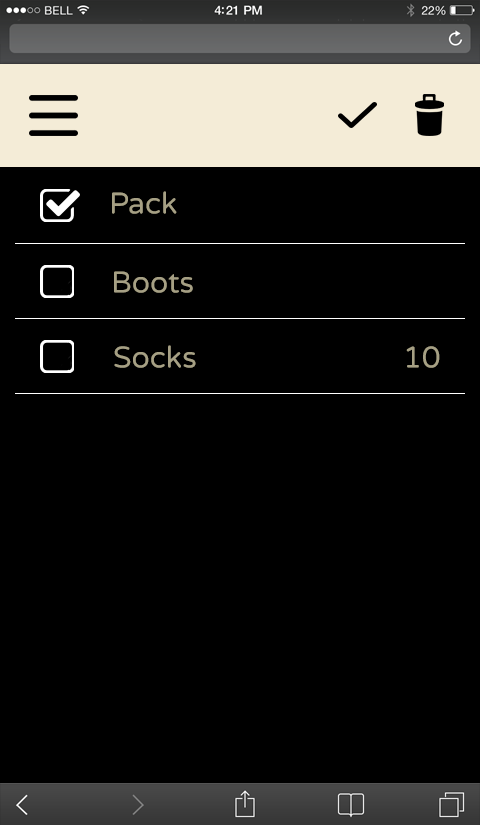
<style>
.page{position:relative;width:480px;height:825px;background:#000000}
.page>*{position:absolute;margin:0}
.t1{font:30px "VarelaRound-Regular";color:#a6a084}
</style>
<div class="page">
<p class="t1" style="left:112px;top:191px;width:65px;height:23px">Pack</p>
<p class="t1" style="left:114px;top:271px;width:79px;height:22px">Boots</p>
<p class="t1" style="left:114px;top:345px;width:82px;height:23px">Socks</p>
<p class="t1" style="left:406px;top:346px;width:34px;height:22px">10</p>
</div>
